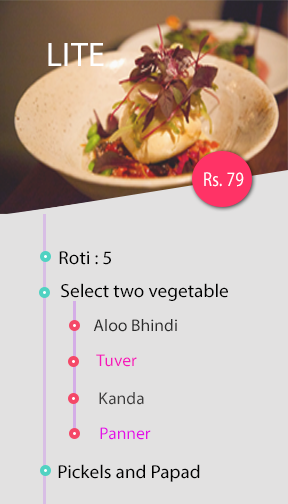
<style>
.page{position:relative;width:288px;height:504px;background:#e2e1e1}
.page>*{position:absolute;margin:0}
.t1{font:34px "MyriadPro-Regular";letter-spacing:0.015em;color:#ffffff}
.t2{font:20.2px "MyriadPro-Regular";letter-spacing:0.015em;color:#ffffff;scale:0.82 1}
.t3{font:18.8px "MyriadPro-Regular";color:#000000}
.t4{font:17px "MyriadPro-Regular";color:#2b2b2b}
.t5{font:17px "MyriadPro-Regular";color:#f617ba}
.t6{font:17px "MyriadPro-Regular";color:#3c3b3b}
.t7{font:17px "MyriadPro-Regular";color:#e30fe6}
</style>
<div class="page">
<p class="t1" style="left:48px;top:43px;width:56px;height:23px">LITE</p>
<p class="t2" style="left:204px;top:172px;width:40px;height:15px">Rs. 79</p>
<p class="t3" style="left:59px;top:251px;width:52px;height:14px">Roti : 5</p>
<p class="t3" style="left:61px;top:283px;width:167px;height:18px">Select two vegetable</p>
<p class="t4" style="left:93px;top:319px;width:84px;height:13px">Aloo Bhindi</p>
<p class="t5" style="left:96px;top:354px;width:41px;height:13px">Tuver</p>
<p class="t6" style="left:99px;top:392px;width:45px;height:13px">Kanda</p>
<p class="t7" style="left:100px;top:427px;width:51px;height:13px">Panner</p>
<p class="t3" style="left:58px;top:464px;width:142px;height:18px">Pickels and Papad</p>
</div>
